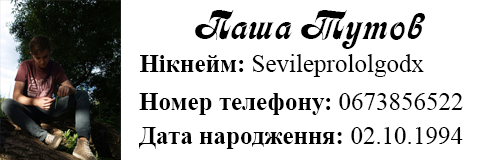
<style>
.page{position:relative;width:480px;height:160px;background:#ffffff}
.page>*{position:absolute;margin:0}
.t1{font:41.7px "Asessor";color:#000000}
.t2{font:25px "TimesNewRomanPSMT";color:#000000}
.t3{font:25px "TimesNewRomanPS-BoldMT";color:#000000}
</style>
<div class="page">
<p class="t1" style="left:195px;top:10px;width:230px;height:39px">Паша Тутов</p>
<p class="t2" style="left:140px;top:54px;width:284px;height:23px"><span class="t3">Нікнейм: </span>Sevileprololgodx</p>
<p class="t3" style="left:139px;top:93px;width:324px;height:22px">Номер телефону: <span class="t2">0673856522</span></p>
<p class="t3" style="left:139px;top:127px;width:324px;height:22px">Дата народження: <span class="t2">02.10.1994</span></p>
</div>
